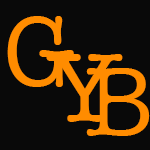
<style>
.page{position:relative;width:150px;height:150px;background:#090909}
.page>*{position:absolute;margin:0}
.t1{font:100px "AmericanTypewriter";letter-spacing:0.2em;color:#ff8c00}
</style>
<div class="page">
<p class="t1" style="left:7px;top:16px;width:67px;height:71px">G</p>
<p class="t1" style="left:46px;top:54px;width:77px;height:68px">Y</p>
<p class="t1" style="left:86px;top:68px;width:64px;height:68px">B</p>
</div>
